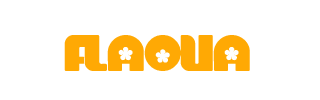
<style>
.page{position:relative;width:320px;height:100px;background:#ffffff}
.page>*{position:absolute;margin:0}
.t1{font:72px "Chick";color:#ffa904}
</style>
<div class="page">
<p class="t1" style="left:64px;top:35px;width:186px;height:36px">FLAOUA</p>
</div>
